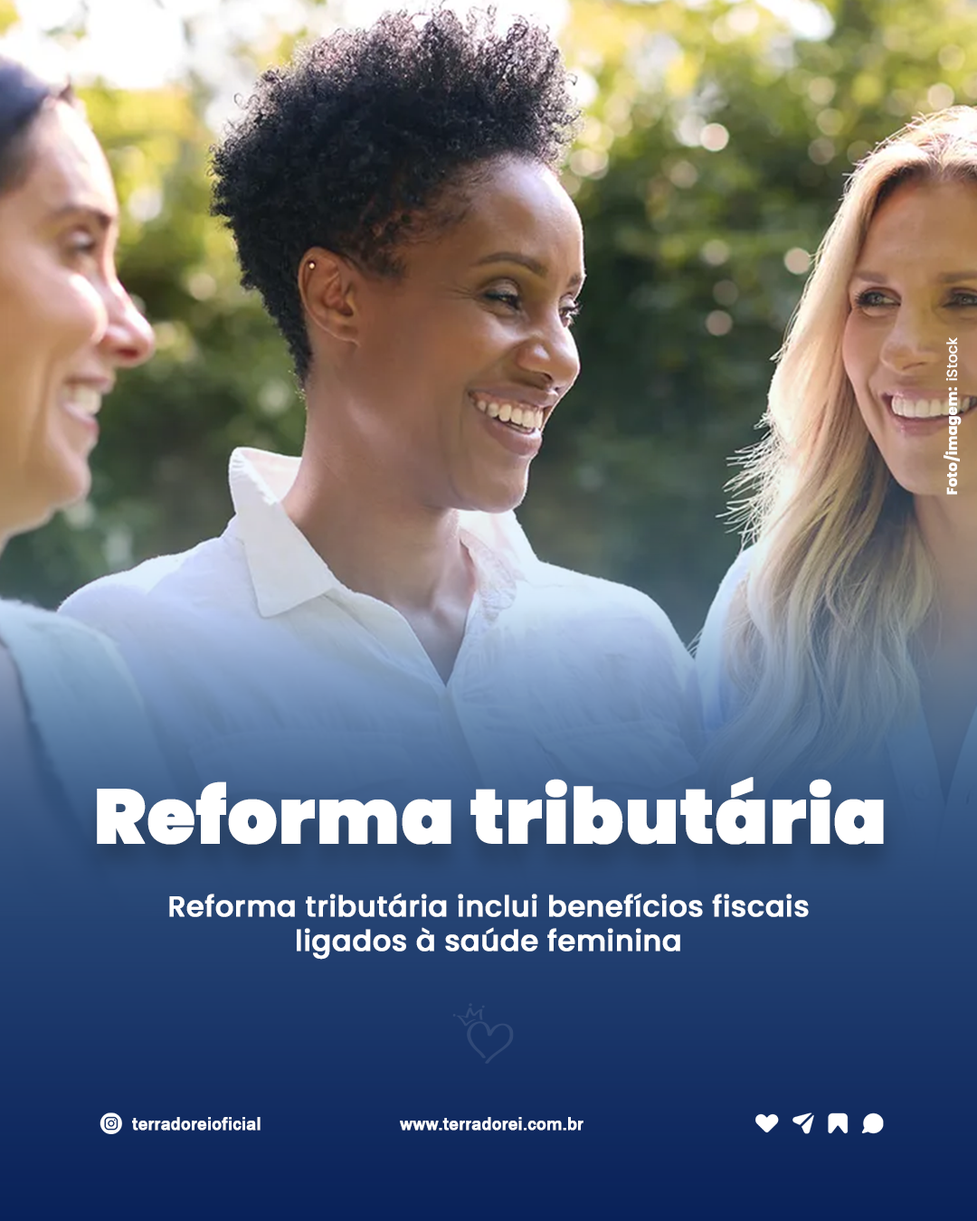
<style>
.page{position:relative;width:977px;height:1221px}
.page>*{position:absolute;margin:0}
.t1{font:14.1px "Poppins-Regular";color:#ffffff;font-weight:bold}
.t2{font:14.1px "Poppins-Bold";color:#ffffff;font-weight:bold}
.t3{font:76.6px "Poppins-Black";color:#ffffff;font-weight:bold}
.t4{font:28.7px "Poppins-Medium";color:#ffffff;font-weight:bold}
.t5{font:17.8px "FranklinGothic-Medium";color:#ffffff;font-weight:bold}
</style>
<div class="page">
<p class="t1" style="left:945px;top:337px;width:13px;height:44px;rotate:-90deg">iStock</p>
<p class="t2" style="left:943px;top:387px;width:18px;height:108px;rotate:-90deg">Foto/imagem:</p>
<p class="t3" style="left:97px;top:777px;width:787px;height:68px">Reforma tributária</p>
<p class="t4" style="left:169px;top:893px;width:639px;height:67px;text-align:center">Reforma tributária inclui benefícios fiscais ligados à saúde feminina</p>
<p class="t5" style="left:132px;top:1117px;width:128px;height:13px">terradoreioficial</p>
<p class="t5" style="left:400px;top:1117px;width:183px;height:13px">www.terradorei.com.br</p>
</div>
